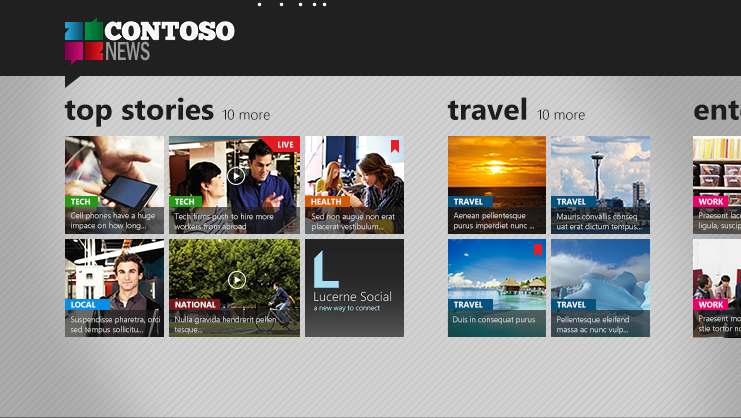
<style>
.page{position:relative;width:741px;height:418px}
.page>*{position:absolute;margin:0}
.t1{font:30px "SegoeUI-Bold";color:#1d1d1d}
.t2{font:14px "SegoeUI-Semilight";color:#1d1d1d}
.t3{font:8px "SegoeUI-Bold";color:#f1f1f1}
.t4{font:8px "SegoeUI-Bold";color:#fffefe}
.t5{font:8px/10px "SegoeUI-Semilight"}
.t6{font:8px "SegoeUI-Semilight"}
</style>
<div class="page">
<p class="t1" style="left:64px;top:97px;width:150px;height:30px">top stories</p>
<p class="t1" style="left:447px;top:97px;width:80px;height:23px">travel</p>
<p class="t2" style="left:222px;top:109px;width:48px;height:11px">10 more</p>
<p class="t2" style="left:537px;top:109px;width:48px;height:11px">10 more</p>
<p class="t3" style="left:278px;top:141px;width:16px;height:7px">LIVE</p>
<p class="t4" style="left:71px;top:198px;width:19px;height:7px">TECH</p>
<p class="t4" style="left:175px;top:198px;width:19px;height:7px">TECH</p>
<p class="t4" style="left:311px;top:198px;width:30px;height:7px">HEALTH</p>
<p class="t4" style="left:454px;top:198px;width:29px;height:7px">TRAVEL</p>
<p class="t4" style="left:557px;top:198px;width:29px;height:7px">TRAVEL</p>
<p class="t4" style="left:698px;top:198px;width:26px;height:7px">WORK</p>
<p class="t5" style="left:71px;top:212px;width:84px;height:18px">Cell phones have a huge<br>impace on how long...</p>
<p class="t5" style="left:174px;top:213px;width:100px;height:17px">Tech firms push to hire more <br>workers from abroad</p>
<p class="t5" style="left:312px;top:213px;width:83px;height:18px">Sed non augue non erat <br>placerat vestibulum...</p>
<p class="t5" style="left:453px;top:212px;width:81px;height:18px">Aenean pellentesque <br>purus imperdiet nunc ...</p>
<p class="t5" style="left:557px;top:213px;width:85px;height:18px">Mauris convallis conseq<br>uat erat dictum tempus...</p>
<p class="t4" style="left:71px;top:301px;width:25px;height:7px">LOCAL</p>
<p class="t4" style="left:175px;top:301px;width:41px;height:7px">NATIONAL</p>
<p class="t4" style="left:454px;top:301px;width:29px;height:7px">TRAVEL</p>
<p class="t4" style="left:557px;top:301px;width:29px;height:7px">TRAVEL</p>
<p class="t4" style="left:698px;top:301px;width:26px;height:7px">WORK</p>
<p class="t5" style="left:71px;top:316px;width:89px;height:18px">Suspendisse pharetra, orci<br>sed tempus sollicitu...</p>
<p class="t5" style="left:174px;top:316px;width:102px;height:18px">Nulla gravida hendrerit pellen<br>tesque...</p>
<p class="t6" style="left:453px;top:316px;width:82px;height:8px">Duis in consequat purus</p>
<p class="t5" style="left:557px;top:316px;width:72px;height:18px">Pellentesque eleifend <br>massa ac nunc vulp...</p>
</div>
